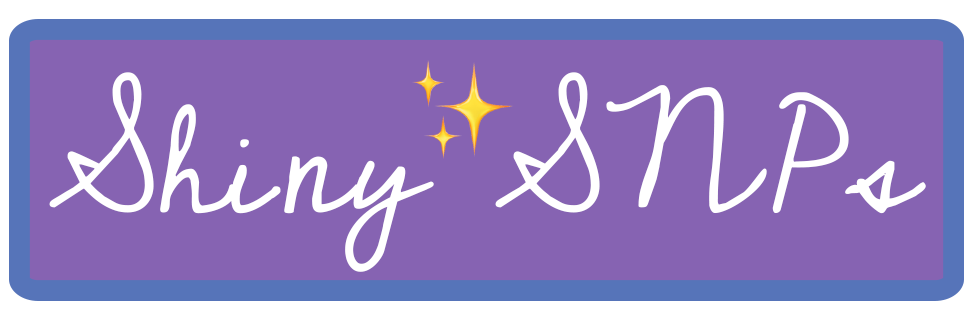
<style>
.page{position:relative;width:975px;height:319px;background:#8663b2}
.page>*{position:absolute;margin:0}
.t1{font:150px "Cedarville-Cursive";color:#ffffff}
</style>
<div class="page">
<p class="t1" style="left:49px;top:72px;width:877px;height:200px">Shiny SNPs</p>
</div>
